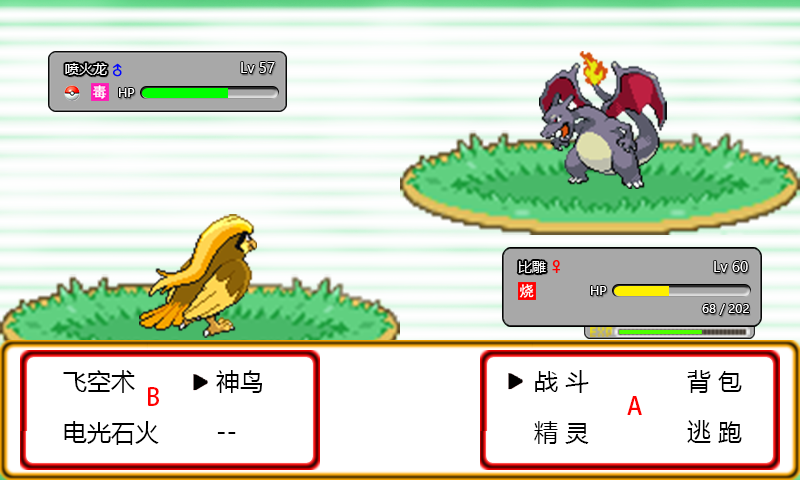
<style>
.page{position:relative;width:800px;height:480px;background:#ffffff}
.page>*{position:absolute;margin:0}
.t1{font:14px "MicrosoftYaHeiUI";color:#ffffff}
.t2{font:12px "MicrosoftYaHeiUI";color:#ffffff}
.t3{font:24px "MicrosoftYaHeiUI";color:#000000}
.t4{font:24px "AdobeHeitiStd-Regular";color:#ff0000}
</style>
<div class="page">
<p class="t1" style="left:65px;top:63px;width:42px;height:12px">喷火龙</p>
<p class="t1" style="left:241px;top:62px;width:34px;height:11px">Lv 57</p>
<p class="t2" style="left:119px;top:88px;width:16px;height:9px">HP</p>
<p class="t1" style="left:518px;top:261px;width:28px;height:12px">比雕</p>
<p class="t1" style="left:714px;top:261px;width:34px;height:11px">Lv 60</p>
<p class="t2" style="left:591px;top:286px;width:16px;height:9px">HP</p>
<p class="t2" style="left:702px;top:304px;width:47px;height:11px">68 / 202</p>
<p class="t3" style="left:63px;top:370px;width:72px;height:23px">飞空术</p>
<p class="t3" style="left:216px;top:370px;width:46px;height:23px">神鸟</p>
<p class="t3" style="left:535px;top:370px;width:54px;height:23px">战 斗</p>
<p class="t3" style="left:687px;top:370px;width:55px;height:23px">背 包</p>
<p class="t4" style="left:148px;top:387px;width:11px;height:19px">B</p>
<p class="t4" style="left:627px;top:396px;width:15px;height:19px">A</p>
<p class="t3" style="left:64px;top:421px;width:95px;height:24px">电光石火</p>
<p class="t3" style="left:534px;top:421px;width:55px;height:23px">精 灵</p>
<p class="t3" style="left:687px;top:420px;width:55px;height:23px">逃 跑</p>
<p class="t3" style="left:217px;top:432px;width:19px;height:2px">--</p>
</div>
